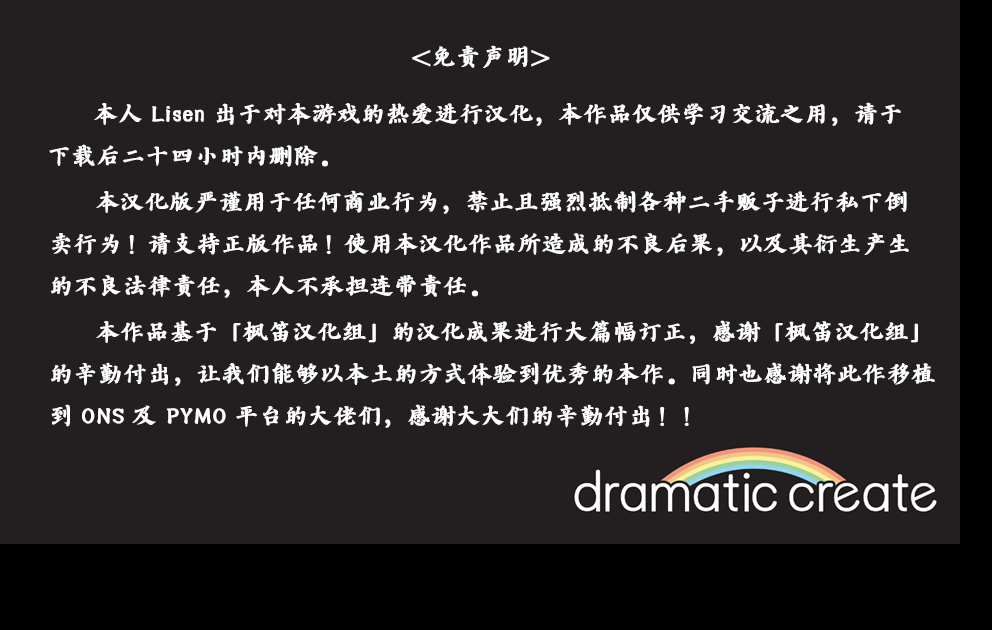
<style>
.page{position:relative;width:992px;height:630px;background:#231f20}
.page>*{position:absolute;margin:0}
.t1{font:24px "AaYZQDBTBNon-CommercialUse";color:#ffffff;font-weight:bold}
</style>
<div class="page">
<p class="t1" style="left:412px;top:45px;width:138px;height:23px">&lt;免责声明&gt;</p>
<p class="t1" style="left:49px;top:102px;width:852px;height:65px">本人 Lisen 出于对本游戏的热爱进行汉化，本作品仅供学习交流之用，请于<br>下载后二十四小时内删除。</p>
<p class="t1" style="left:51px;top:190px;width:858px;height:108px">本汉化版严谨用于任何商业行为，禁止且强烈抵制各种二手贩子进行私下倒<br>卖行为！请支持正版作品！使用本汉化作品所造成的不良后果，以及其衍生产生<br>的不良法律责任，本人不承担连带责任。</p>
<p class="t1" style="left:51px;top:320px;width:884px;height:108px">本作品基于「枫笛汉化组」的汉化成果进行大篇幅订正，感谢「枫笛汉化组」<br>的辛勤付出，让我们能够以本土的方式体验到优秀的本作。同时也感谢将此作移植<br>到 ONS 及 PYMO 平台的大佬们，感谢大大们的辛勤付出！！</p>
</div>
